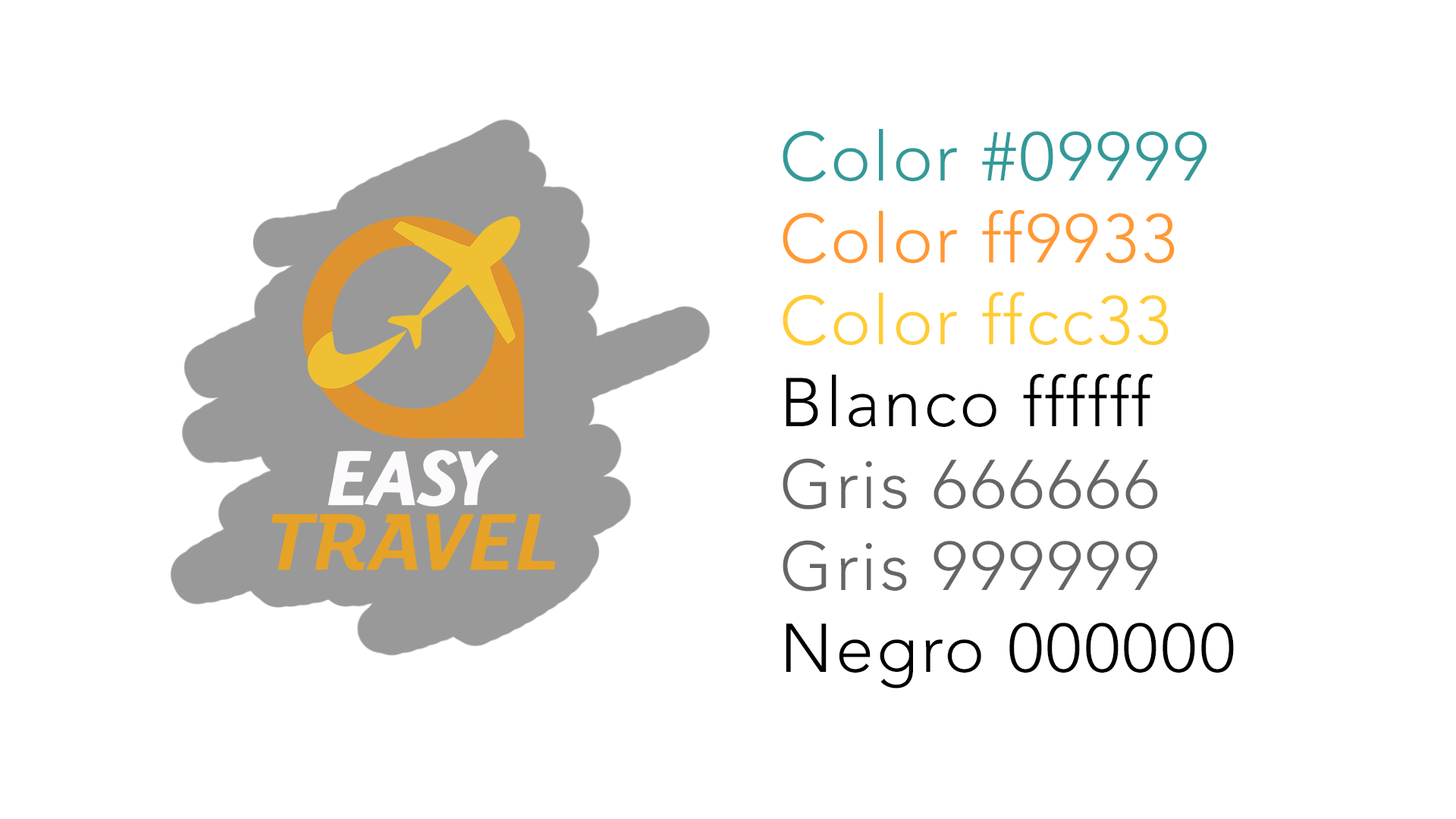
<style>
.page{position:relative;width:1456px;height:819px;background:#ffffff}
.page>*{position:absolute;margin:0}
.t1{font:68.2px "Avenir-Light";letter-spacing:0.04em;color:#666666}
.t2{font:68.2px/36.4px "Avenir-Light";letter-spacing:0.04em;color:#339999}
.t3{font:68.2px "Avenir-Light";letter-spacing:0.04em;color:#ff9933}
.t4{font:68.2px "Avenir-Light";letter-spacing:0.04em;color:#ffcc33}
.t5{font:68.2px "Avenir-Light";letter-spacing:0.04em;color:#000000}
</style>
<div class="page">
<p class="t1" style="left:783px;top:129px;width:451px;height:560px"><span class="t2">Color #09999 <br></span><span class="t3">Color ff9933 <br></span><span class="t4">Color ffcc33<br></span><span class="t5">Blanco ffffff<br></span>Gris 666666<br>Gris 999999<br><span class="t5">Negro 000000</span></p>
</div>
